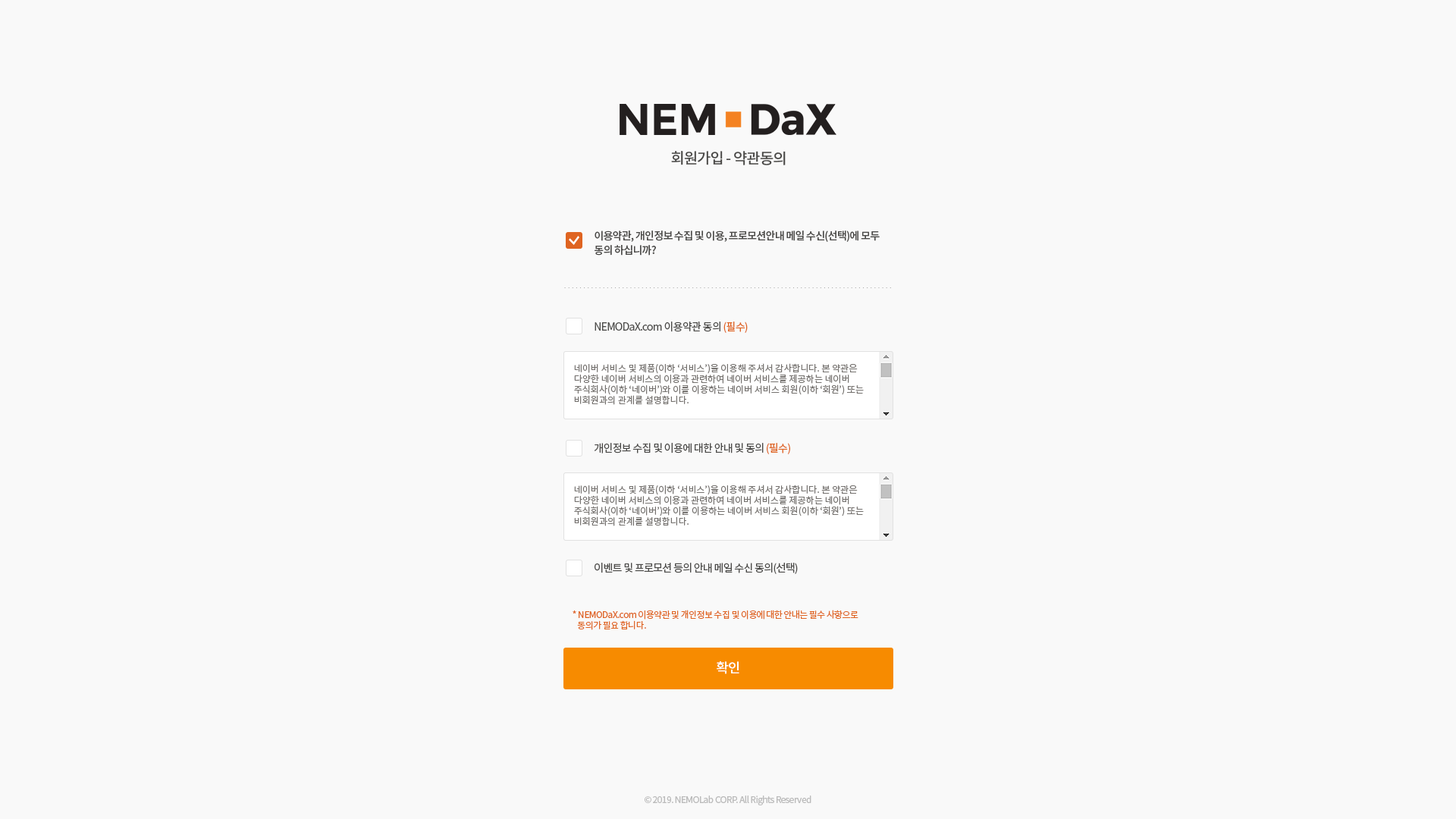
<style>
.page{position:relative;width:1456px;height:819px;background:#f9f9f9}
.page>*{position:absolute;margin:0}
.t1{font:15.2px "NotoSansCJKkr-Medium";letter-spacing:-0.05em;color:#4a4947}
.t2{font:10.6px/11.4px "NotoSansCJKkr-Medium";letter-spacing:-0.05em;color:#4a4947}
.t3{font:10.6px "NotoSansCJKkr-Regular";letter-spacing:-0.05em;color:#4a4947}
.t4{font:10.6px "NotoSansCJKkr-Regular";letter-spacing:-0.05em;color:#df6421}
.t5{font:9.1px/10.6px "NotoSansCJKkr-Regular";color:#75726f}
.t6{font:9.1px/9.1px "NotoSansCJKkr-Regular";letter-spacing:-0.05em;color:#df6422}
.t7{font:13.6px "NotoSansCJKkr-Medium";letter-spacing:-0.05em;color:#fffefe}
.t8{font:9.1px "NotoSansCJKkr-Regular";letter-spacing:-0.05em;color:#bbbbbb}
</style>
<div class="page">
<p class="t1" style="left:671px;top:151px;width:115px;height:14px">회원가입 - 약관동의</p>
<p class="t2" style="left:595px;top:231px;width:285px;height:25px">이용약관, 개인정보 수집 및 이용, 프로모션안내 메일 수신(선택)에 모두 <br>동의 하십니까?</p>
<p class="t3" style="left:595px;top:322px;width:153px;height:11px">NEMODaX.com 이용약관 동의 <span class="t4">(필수)</span></p>
<p class="t5" style="left:574px;top:363px;width:290px;height:42px">네이버 서비스 및 제품(이하 ‘서비스’)을 이용해 주셔서 감사합니다. 본 약관은 다양한 네이버 서비스의 이용과 관련하여 네이버 서비스를 제공하는 네이버 주식회사(이하 ‘네이버’)와 이를 이용하는 네이버 서비스 회원(이하 ‘회원’) 또는 비회원과의 관계를 설명합니다.</p>
<p class="t3" style="left:594px;top:443px;width:196px;height:11px">개인정보 수집 및 이용에 대한 안내 및 동의 <span class="t4">(필수)</span></p>
<p class="t5" style="left:574px;top:485px;width:290px;height:41px">네이버 서비스 및 제품(이하 ‘서비스’)을 이용해 주셔서 감사합니다. 본 약관은 다양한 네이버 서비스의 이용과 관련하여 네이버 서비스를 제공하는 네이버 주식회사(이하 ‘네이버’)와 이를 이용하는 네이버 서비스 회원(이하 ‘회원’) 또는 비회원과의 관계를 설명합니다.</p>
<p class="t3" style="left:595px;top:563px;width:203px;height:11px">이벤트 및 프로모션 등의 안내 메일 수신 동의(선택)</p>
<p class="t6" style="left:573px;top:610px;width:285px;height:20px">* NEMODaX.com 이용약관 및 개인정보 수집 및 이용에 대한 안내는 필수 사항으로 <br>   동의가 필요 합니다.</p>
<p class="t7" style="left:717px;top:661px;width:22px;height:13px">확인</p>
<p class="t8" style="left:645px;top:795px;width:166px;height:10px">© 2019. NEMOLab CORP. All Rights Reserved</p>
</div>
